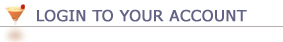
<style>
.page{position:relative;width:283px;height:42px;background:#ffffff}
.page>*{position:absolute;margin:0}
.t1{font:15px "Verdana";color:#636388;font-weight:bold}
</style>
<div class="page">
<p class="t1" style="left:37px;top:9px;width:210px;height:13px">LOGIN TO YOUR ACCOUNT</p>
</div>
